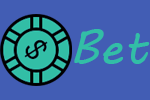
<style>
.page{position:relative;width:150px;height:100px;background:#425db4}
.page>*{position:absolute;margin:0}
.t1{font:48.4px "MVBoli";color:#32bea6}
</style>
<div class="page">
<p class="t1" style="left:74px;top:29px;width:76px;height:35px">Bet</p>
</div>
